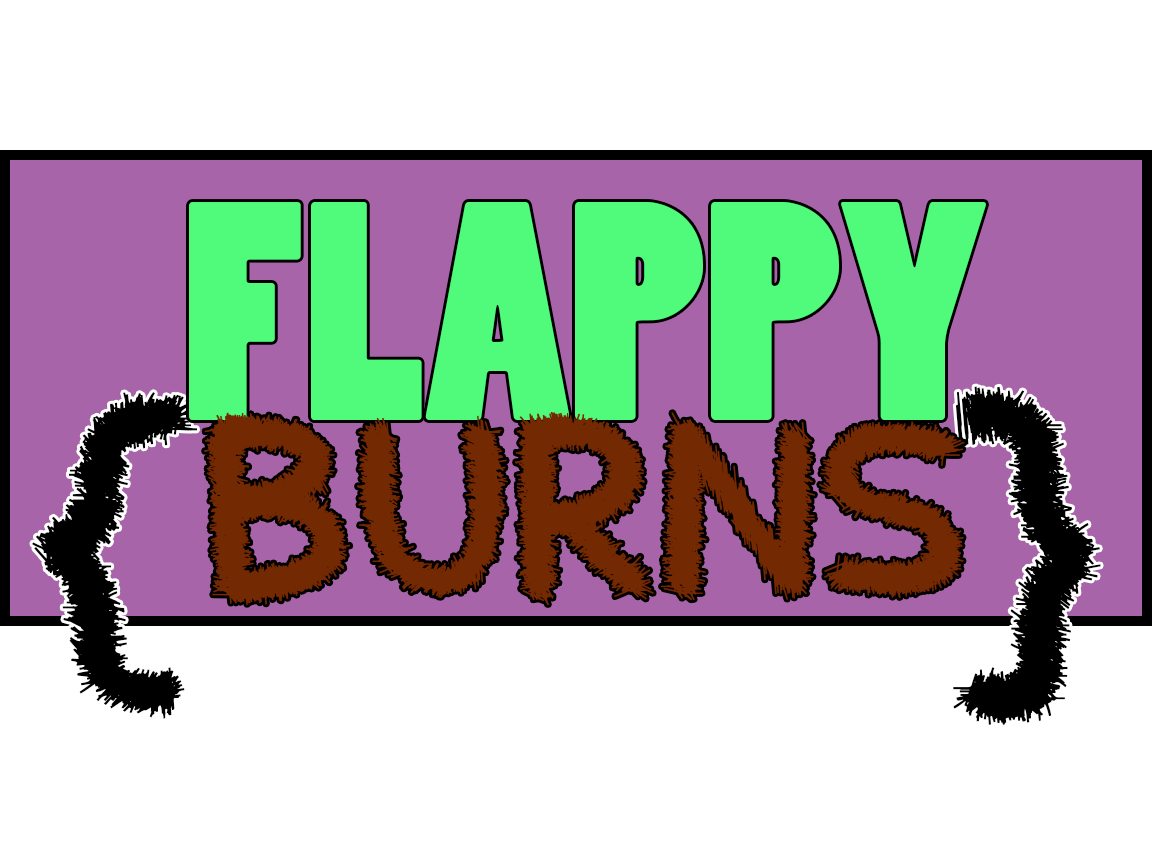
<style>
.page{position:relative;width:1152px;height:864px;background:#ffffff}
.page>*{position:absolute;margin:0}
.t1{font:291px/185px "PoplarStd";color:#50fa7b}
.t2{font:291px/185px "HairyBeard";color:#732901}
.t3{font:420px "HairyBeard";color:#000000}
</style>
<div class="page">
<p class="t1" style="left:189px;top:202px;width:797px;height:403px;text-align:center">FLAPPY<br><span class="t2">BURNS</span></p>
<p class="t3" style="left:32px;top:386px;width:1069px;height:339px">{       }</p>
</div>
